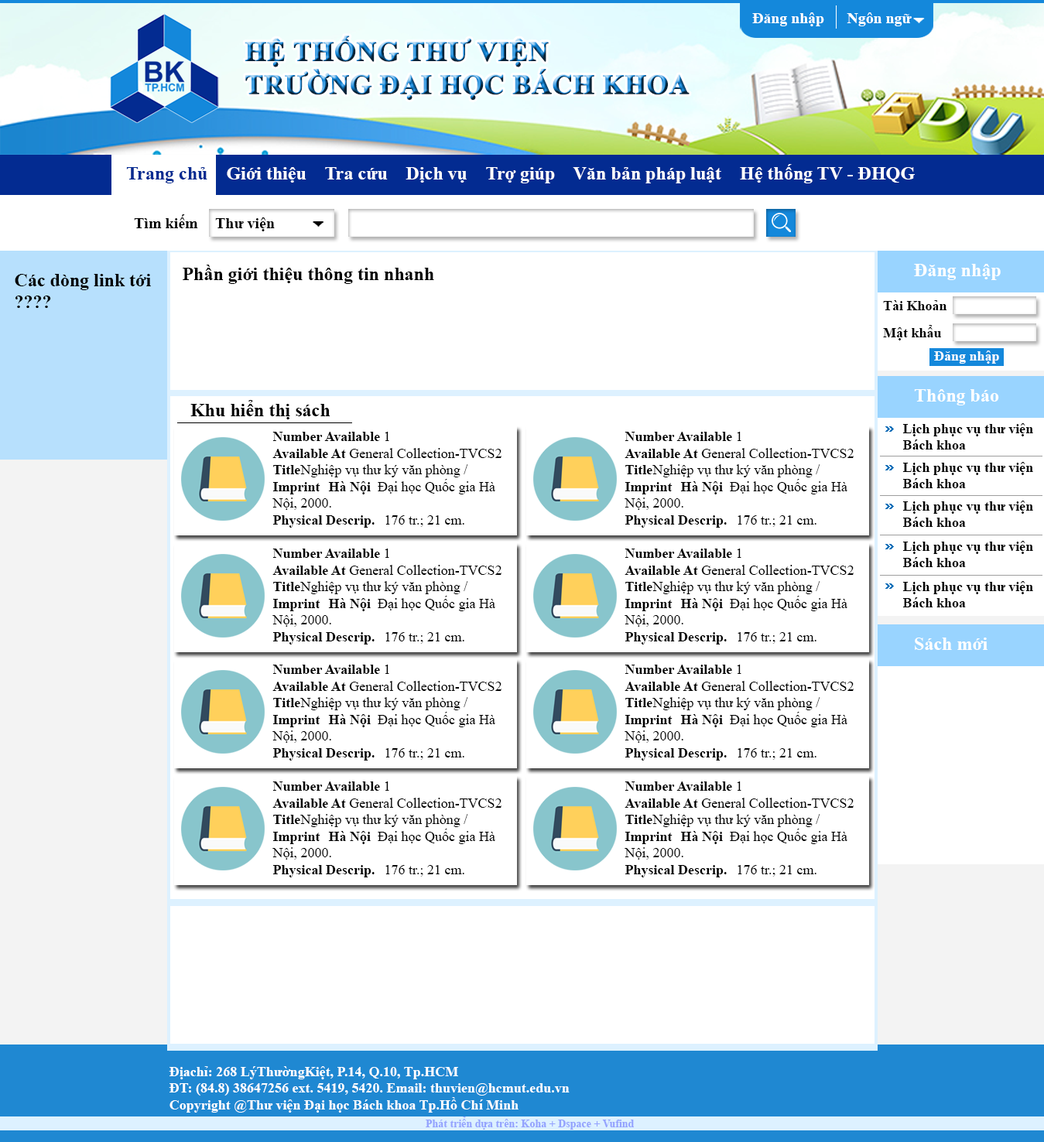
<style>
.page{position:relative;width:1044px;height:1142px;background:#ffffff}
.page>*{position:absolute;margin:0}
.t1{font:15.3px "TimesNewRomanPS-BoldMT";color:#ffffff}
.t2{font:27.5px "TimesNewRomanPS-BoldMT";font-weight:bold}
.t3{font:18.6px "TimesNewRomanPS-BoldMT";color:#ffffff}
.t4{font:18.6px "TimesNewRomanPS-BoldMT";color:#032b91}
.t5{font:15.5px "TimesNewRomanPS-BoldMT";color:#000000}
.t6{font:18.6px "TimesNewRomanPS-BoldMT";color:#000000}
.t7{font:13.9px "TimesNewRomanPS-BoldMT";color:#000000}
.t8{font:13.9px "TimesNewRomanPS-BoldMT";color:#ffffff}
.t9{font:13.9px "TimesNewRomanPSMT";color:#000000}
.t10{font:10.8px "TimesNewRomanPS-BoldMT";color:#94a3fe}
</style>
<div class="page">
<p class="t1" style="left:752px;top:12px;width:160px;height:14px">Đăng nhập      Ngôn ngữ</p>
<p class="t2" style="left:245px;top:36px;width:445px;height:65px">HỆ THỐNG THƯ VIỆN<br>TRƯỜNG ĐẠI HỌC BÁCH KHOA</p>
<p class="t3" style="left:126px;top:164px;width:789px;height:19px"><span class="t4">Trang chủ </span>   Giới thiệu    Tra cứu    Dịch vụ    Trợ giúp    Văn bản pháp luật    Hệ thống TV - ĐHQG</p>
<p class="t5" style="left:134px;top:214px;width:64px;height:14px">Tìm kiếm</p>
<p class="t5" style="left:215px;top:217px;width:60px;height:14px">Thư viện</p>
<p class="t6" style="left:183px;top:265px;width:251px;height:19px">Phần giới thiệu thông tin nhanh</p>
<p class="t3" style="left:914px;top:264px;width:87px;height:16px">Đăng nhập</p>
<p class="t6" style="left:15px;top:274px;width:136px;height:34px">Các dòng link tới <br>????</p>
<p class="t7" style="left:883px;top:300px;width:63px;height:10px">Tài Khoản</p>
<p class="t7" style="left:883px;top:325px;width:58px;height:16px">Mật khẩu</p>
<p class="t8" style="left:934px;top:351px;width:65px;height:13px">Đăng nhập</p>
<p class="t3" style="left:914px;top:389px;width:85px;height:17px">Thông báo</p>
<p class="t6" style="left:190px;top:400px;width:140px;height:19px">Khu hiển thị sách</p>
<p class="t7" style="left:902px;top:423px;width:131px;height:27px">Lịch phục vụ thư viện <br>Bách khoa</p>
<p class="t9" style="left:272px;top:432px;width:229px;height:96px"><span class="t7">Number Available</span> 1<br><span class="t7">Available At</span> General Collection-TVCS2<br><span class="t7">Title</span> Nghiệp vụ thư ký văn phòng /<br><span class="t7">Imprint Hà Nội  </span>Đại học Quốc gia Hà <br>Nội, 2000.<br><span class="t7">Physical Descrip. </span>176 tr.; 21 cm.</p>
<p class="t9" style="left:625px;top:432px;width:229px;height:96px"><span class="t7">Number Available</span> 1<br><span class="t7">Available At</span> General Collection-TVCS2<br><span class="t7">Title</span> Nghiệp vụ thư ký văn phòng /<br><span class="t7">Imprint Hà Nội  </span>Đại học Quốc gia Hà <br>Nội, 2000.<br><span class="t7">Physical Descrip. </span>176 tr.; 21 cm.</p>
<p class="t7" style="left:902px;top:462px;width:131px;height:26px">Lịch phục vụ thư viện <br>Bách khoa</p>
<p class="t7" style="left:902px;top:501px;width:131px;height:26px">Lịch phục vụ thư viện <br>Bách khoa</p>
<p class="t7" style="left:902px;top:541px;width:131px;height:26px">Lịch phục vụ thư viện <br>Bách khoa</p>
<p class="t9" style="left:272px;top:549px;width:229px;height:96px"><span class="t7">Number Available</span> 1<br><span class="t7">Available At</span> General Collection-TVCS2<br><span class="t7">Title</span> Nghiệp vụ thư ký văn phòng /<br><span class="t7">Imprint Hà Nội  </span>Đại học Quốc gia Hà <br>Nội, 2000.<br><span class="t7">Physical Descrip. </span>176 tr.; 21 cm.</p>
<p class="t9" style="left:625px;top:549px;width:229px;height:96px"><span class="t7">Number Available</span> 1<br><span class="t7">Available At</span> General Collection-TVCS2<br><span class="t7">Title</span> Nghiệp vụ thư ký văn phòng /<br><span class="t7">Imprint Hà Nội  </span>Đại học Quốc gia Hà <br>Nội, 2000.<br><span class="t7">Physical Descrip. </span>176 tr.; 21 cm.</p>
<p class="t7" style="left:902px;top:581px;width:131px;height:26px">Lịch phục vụ thư viện <br>Bách khoa</p>
<p class="t3" style="left:915px;top:638px;width:72px;height:12px">Sách mới</p>
<p class="t9" style="left:272px;top:665px;width:229px;height:96px"><span class="t7">Number Available</span> 1<br><span class="t7">Available At</span> General Collection-TVCS2<br><span class="t7">Title</span> Nghiệp vụ thư ký văn phòng /<br><span class="t7">Imprint Hà Nội  </span>Đại học Quốc gia Hà <br>Nội, 2000.<br><span class="t7">Physical Descrip. </span>176 tr.; 21 cm.</p>
<p class="t9" style="left:625px;top:665px;width:229px;height:96px"><span class="t7">Number Available</span> 1<br><span class="t7">Available At</span> General Collection-TVCS2<br><span class="t7">Title</span> Nghiệp vụ thư ký văn phòng /<br><span class="t7">Imprint Hà Nội  </span>Đại học Quốc gia Hà <br>Nội, 2000.<br><span class="t7">Physical Descrip. </span>176 tr.; 21 cm.</p>
<p class="t9" style="left:272px;top:782px;width:229px;height:96px"><span class="t7">Number Available</span> 1<br><span class="t7">Available At</span> General Collection-TVCS2<br><span class="t7">Title</span> Nghiệp vụ thư ký văn phòng /<br><span class="t7">Imprint Hà Nội  </span>Đại học Quốc gia Hà <br>Nội, 2000.<br><span class="t7">Physical Descrip. </span>176 tr.; 21 cm.</p>
<p class="t9" style="left:625px;top:782px;width:229px;height:96px"><span class="t7">Number Available</span> 1<br><span class="t7">Available At</span> General Collection-TVCS2<br><span class="t7">Title</span> Nghiệp vụ thư ký văn phòng /<br><span class="t7">Imprint Hà Nội  </span>Đại học Quốc gia Hà <br>Nội, 2000.<br><span class="t7">Physical Descrip. </span>176 tr.; 21 cm.</p>
<p class="t8" style="left:169px;top:1066px;width:401px;height:47px">Địachỉ: 268 LýThườngKiệt, P.14, Q.10, Tp.HCM<br>ĐT: (84.8) 38647256 ext. 5419, 5420. Email: thuvien@hcmut.edu.vn<br>Copyright @Thư viện Đại học Bách khoa Tp.Hồ Chí Minh</p>
<p class="t10" style="left:426px;top:1117px;width:208px;height:13px">Phát triển dựa trên: Koha + Dspace + Vufind</p>
</div>
